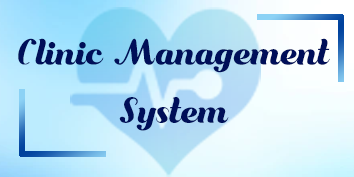
<style>
.page{position:relative;width:354px;height:177px}
.page>*{position:absolute;margin:0}
.t1{font:33.3px/58.3px "Bungasai";color:#000f59}
</style>
<div class="page">
<p class="t1" style="left:18px;top:38px;width:312px;height:93px;text-align:center">Clinic Management<br>System</p>
</div>
